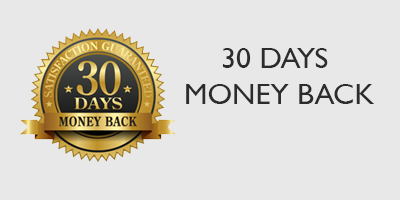
<style>
.page{position:relative;width:400px;height:200px;background:#e8e8e8}
.page>*{position:absolute;margin:0}
.t1{font:30px "GillSans";color:#2c2c2c}
</style>
<div class="page">
<p class="t1" style="left:186px;top:48px;width:189px;height:56px;text-align:center">30 DAYS <br>MONEY BACK</p>
</div>
